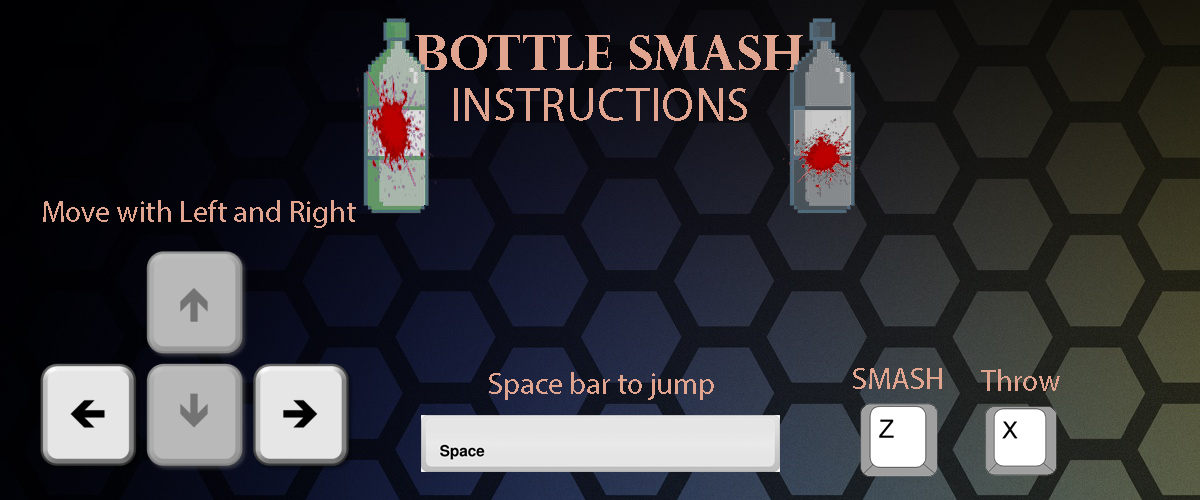
<style>
.page{position:relative;width:1200px;height:500px}
.page>*{position:absolute;margin:0}
.t1{font:48px "MyriadPro-Regular";color:#e1a48f}
.t2{font:30px "MyriadPro-Regular";color:#e1a48f}
</style>
<div class="page">
<p class="t1" style="left:454px;top:88px;width:293px;height:33px">INSTRUCTIONS</p>
<p class="t2" style="left:43px;top:200px;width:313px;height:28px">Move with Left and Right</p>
<p class="t2" style="left:489px;top:372px;width:225px;height:28px">Space bar to jump</p>
<p class="t2" style="left:853px;top:368px;width:89px;height:21px">SMASH</p>
<p class="t2" style="left:981px;top:369px;width:79px;height:22px">Throw</p>
</div>
